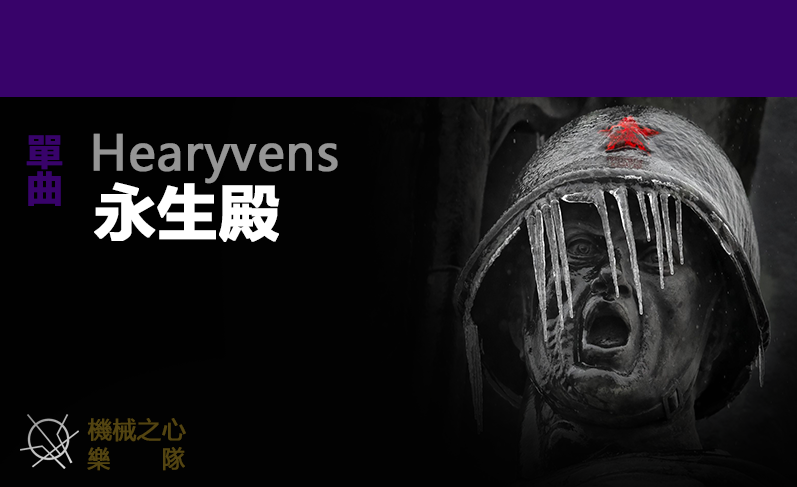
<style>
.page{position:relative;width:797px;height:487px;background:#020202}
.page>*{position:absolute;margin:0}
.t1{font:36px "MicrosoftYaHei-Bold";color:#38036a;font-weight:bold}
.t2{font:48px "MicrosoftYaHei";color:#959595;font-weight:bold}
.t3{font:60px "MicrosoftYaHei-Bold";color:#ffffff;font-weight:bold}
.t4{font:24px "MicrosoftYaHei";color:#534411;font-weight:bold}
.t5{font:24.3px "MicrosoftYaHei";color:#534411;font-weight:bold;scale:0.94 1}
</style>
<div class="page">
<p class="t1" style="left:26px;top:135px;width:37px;height:71px">單曲</p>
<p class="t2" style="left:93px;top:133px;width:245px;height:51px">Hearyvens</p>
<p class="t3" style="left:94px;top:182px;width:186px;height:60px">永生殿</p>
<p class="t4" style="left:87px;top:418px;width:99px;height:24px">機械之心</p>
<p class="t5" style="left:87px;top:447px;width:98px;height:24px">樂       隊</p>
</div>
